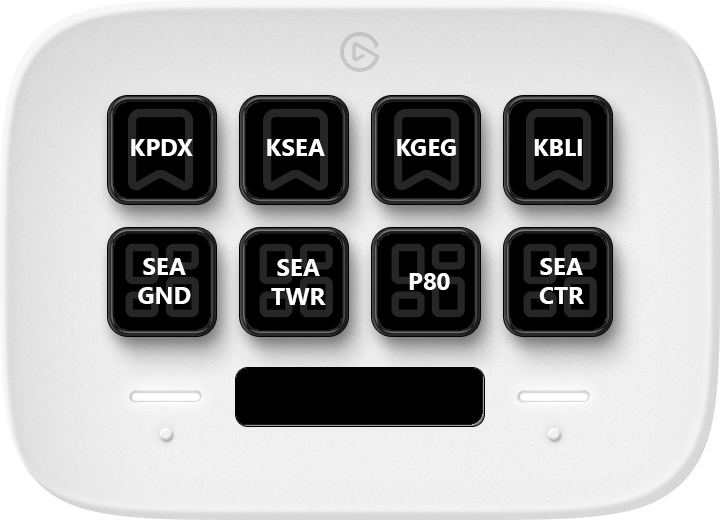
<style>
.page{position:relative;width:720px;height:520px}
.page>*{position:absolute;margin:0}
.t1{font:24px "SegoeUI-Bold";color:#ffffff}
</style>
<div class="page">
<p class="t1" style="left:131px;top:139px;width:62px;height:17px">KPDX</p>
<p class="t1" style="left:267px;top:139px;width:58px;height:17px">KSEA</p>
<p class="t1" style="left:397px;top:139px;width:59px;height:17px">KGEG</p>
<p class="t1" style="left:534px;top:139px;width:48px;height:17px">KBLI</p>
<p class="t1" style="left:138px;top:258px;width:53px;height:46px;text-align:center">SEA<br>GND</p>
<p class="t1" style="left:271px;top:259px;width:55px;height:46px;text-align:center">SEA<br>TWR</p>
<p class="t1" style="left:539px;top:258px;width:45px;height:46px;text-align:center">SEA<br>CTR</p>
<p class="t1" style="left:409px;top:273px;width:41px;height:17px">P80</p>
</div>
